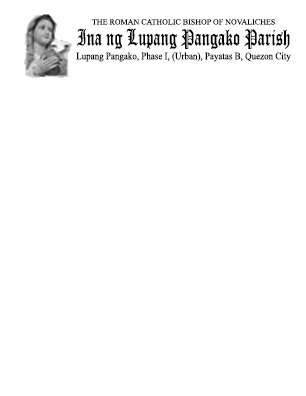
<style>
.page{position:relative;width:306px;height:396px;background:#ffffff}
.page>*{position:absolute;margin:0}
.t1{font:22.7px "OldEnglishTextMT";color:#000000;scale:0.71 1}
.t2{font:8px "TimesNewRomanPSMT";color:#000000}
.t3{font:10px "TimesNewRomanPSMT";color:#000000;scale:0.9 1}
</style>
<div class="page">
<p class="t1" style="left:77px;top:28px;width:213px;height:21px">Ina ng Lupang Pangako Parish</p>
<p class="t2" style="left:92px;top:19px;width:183px;height:6px">THE ROMAN CATHOLIC BISHOP OF NOVALICHES</p>
<p class="t3" style="left:76px;top:52px;width:215px;height:10px">Lupang Pangako, Phase I, (Urban), Payatas B, Quezon City</p>
</div>
